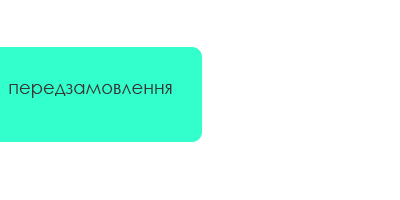
<style>
.page{position:relative;width:400px;height:200px;background:#ffffff}
.page>*{position:absolute;margin:0}
.t1{font:18px "CenturyGothic";color:#363636}
</style>
<div class="page">
<p class="t1" style="left:9px;top:84px;width:163px;height:14px">передзамовлення</p>
</div>
